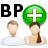
<style>
.page{position:relative;width:48px;height:48px;background:#ffffff}
.page>*{position:absolute;margin:0}
.t1{font:18px "GillSansStd-Bold";color:#000000}
</style>
<div class="page">
<p class="t1" style="left:1px;top:4px;width:22px;height:13px">BP</p>
</div>
